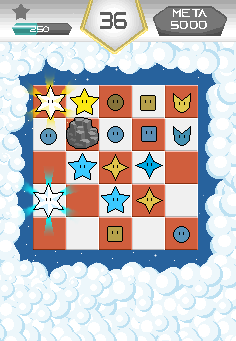
<style>
.page{position:relative;width:236px;height:341px;background:#edf7fb}
.page>*{position:absolute;margin:0}
.t1{font:24.4px "AzonixRegular";color:#5c5c5c;scale:0.76 1}
.t2{font:12px "AzonixRegular";color:#ffffff}
.t3{font:8px "AzonixRegular";color:#ffffff}
</style>
<div class="page">
<p class="t1" style="left:100px;top:12px;width:27px;height:17px">36</p>
<p class="t2" style="left:173px;top:9px;width:34px;height:8px">Meta</p>
<p class="t3" style="left:30px;top:26px;width:19px;height:6px">250</p>
<p class="t2" style="left:171px;top:21px;width:36px;height:8px">5000</p>
</div>
